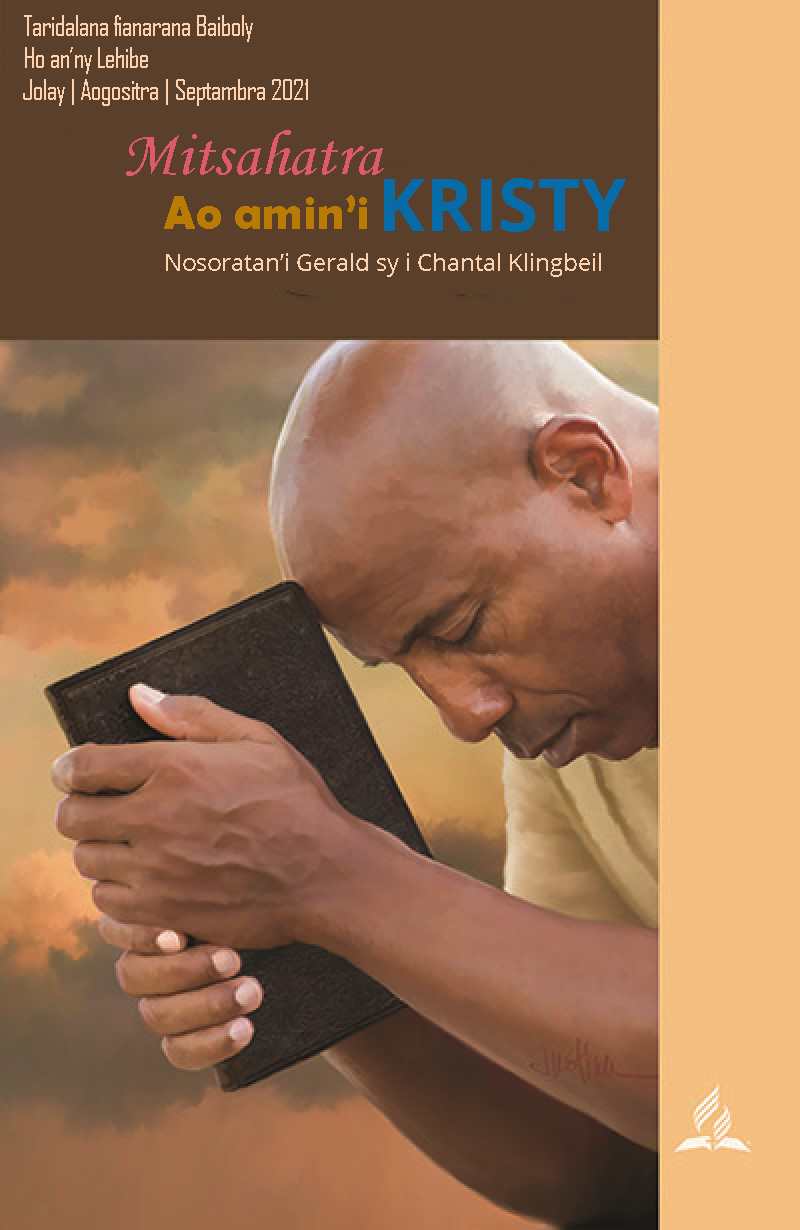
<style>
.page{position:relative;width:800px;height:1230px}
.page>*{position:absolute;margin:0}
.t1{font:26.7px "AgencyFB-Reg";color:#fed1af}
.t2{font:64px "MonotypeCorsiva";color:#dc596f}
.t3{font:73.3px "OpenSans-Bold";color:#066ba6}
.t4{font:48px "BerlinSansFBDemi-Bold";color:#ba7b05}
.t5{font:24px "OpenSans-Regular";color:#fed1af}
</style>
<div class="page">
<p class="t1" style="left:24px;top:15px;width:229px;height:59px">Taridalana fianarana Baiboly<br>Ho an’ny Lehibe</p>
<p class="t1" style="left:23px;top:79px;width:285px;height:27px">Jolay | Aogositra | Septambra 2021</p>
<p class="t2" style="left:126px;top:130px;width:258px;height:46px">Mitsahatra</p>
<p class="t3" style="left:384px;top:178px;width:242px;height:54px">KRISTY</p>
<p class="t4" style="left:164px;top:195px;width:203px;height:34px">Ao amin’i</p>
<p class="t5" style="left:166px;top:253px;width:435px;height:24px">Nosoratan’i Gerald sy i Chantal Klingbeil</p>
</div>
